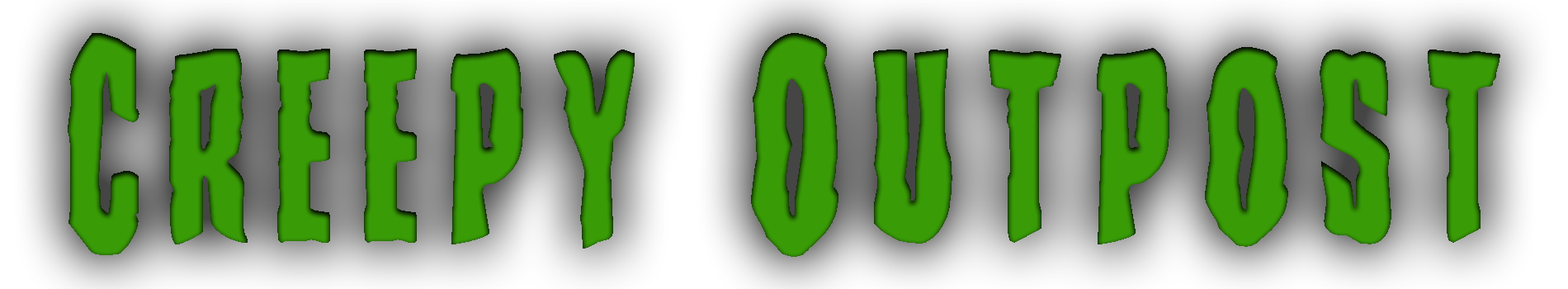
<style>
.page{position:relative;width:1568px;height:289px}
.page>*{position:absolute;margin:0}
.t1{font:265.3px "CreepyCrawlersBold";letter-spacing:0.08em;color:#399c06;scale:1.07 1}
</style>
<div class="page">
<p class="t1" style="left:68px;top:33px;width:1432px;height:224px">Creepy Outpost</p>
</div>
